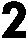
<style>
.page{position:relative;width:28px;height:40px;background:#ffffff}
.page>*{position:absolute;margin:0}
.t1{font:50.4px "Scandia-Medium";color:#000000;font-weight:bold;scale:0.91 1}
</style>
<div class="page">
<p class="t1" style="left:2px;top:1px;width:24px;height:37px">2</p>
</div>
